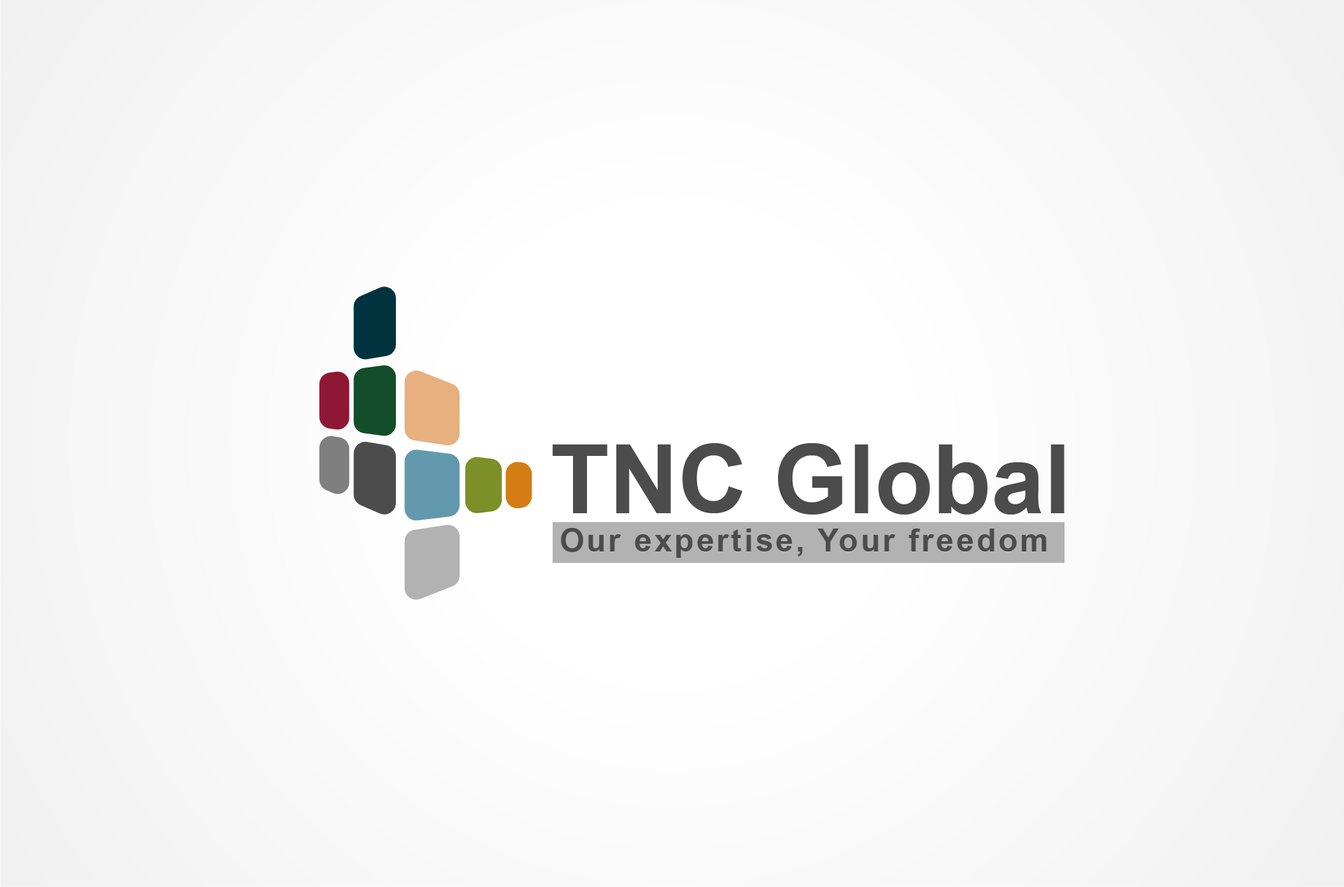
<style>
.page{position:relative;width:1344px;height:887px}
.page>*{position:absolute;margin:0}
.t1{font:95.5px "Arial-BoldMT";color:#4c4c4c}
.t2{font:31.8px "Arial-BoldMT";letter-spacing:0.075em;color:#4c4c4c}
</style>
<div class="page">
<p class="t1" style="left:553px;top:443px;width:512px;height:72px">TNC Global</p>
<p class="t2" style="left:561px;top:528px;width:486px;height:30px">Our expertise, Your freedom</p>
</div>
